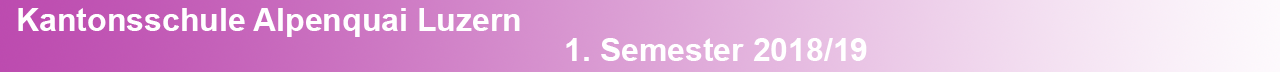
<style>
.page{position:relative;width:1280px;height:72px}
.page>*{position:absolute;margin:0}
.t1{font:32px "Arial-BoldMT";color:#ffffff}
</style>
<div class="page">
<p class="t1" style="left:18px;top:8px;width:502px;height:29px">Kantonsschule Alpenquai Luzern</p>
<p class="t1" style="left:566px;top:38px;width:301px;height:23px">1. Semester 2018/19</p>
</div>
